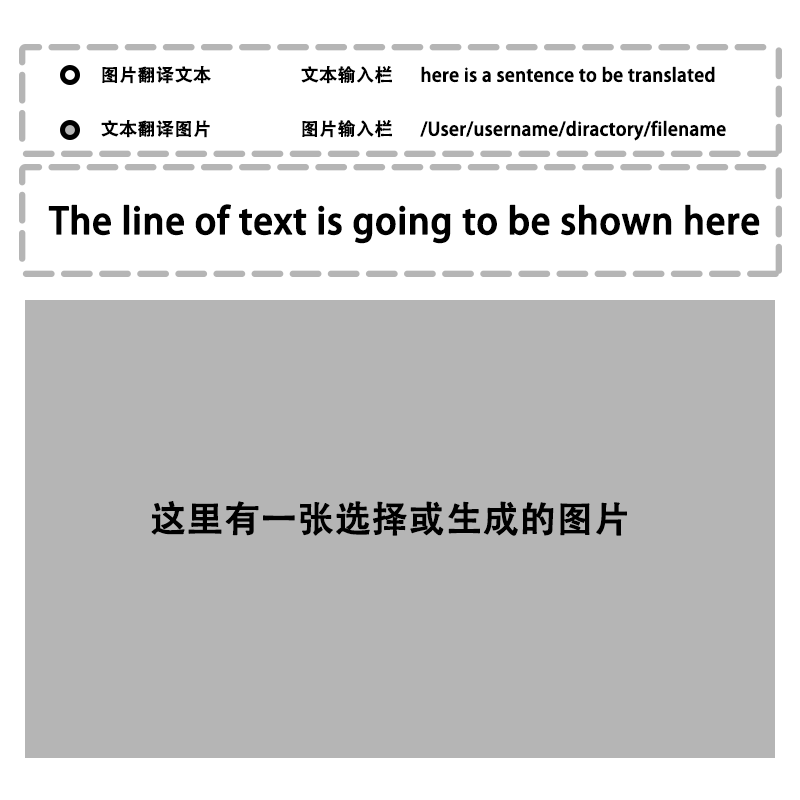
<style>
.page{position:relative;width:800px;height:800px;background:#b5b5b5}
.page>*{position:absolute;margin:0}
.t1{font:18px/54px "AdobeHeitiStd-Regular";color:#000000;font-weight:bold}
.t2{font:36px "AdobeHeitiStd-Regular";color:#000000;font-weight:bold}
</style>
<div class="page">
<p class="t1" style="left:101px;top:66px;width:110px;height:72px">图片翻译文本<br>文本翻译图片</p>
<p class="t1" style="left:301px;top:66px;width:91px;height:72px">文本输入栏<br>图片输入栏</p>
<p class="t1" style="left:420px;top:66px;width:306px;height:75px">ｈere is a sentence to be translated<br>/User/username/diractory/filename</p>
<p class="t2" style="left:48px;top:204px;width:712px;height:40px">The line of text is going to be shown here</p>
<p class="t2" style="left:151px;top:501px;width:476px;height:35px">这里有一张选择或生成的图片</p>
</div>
